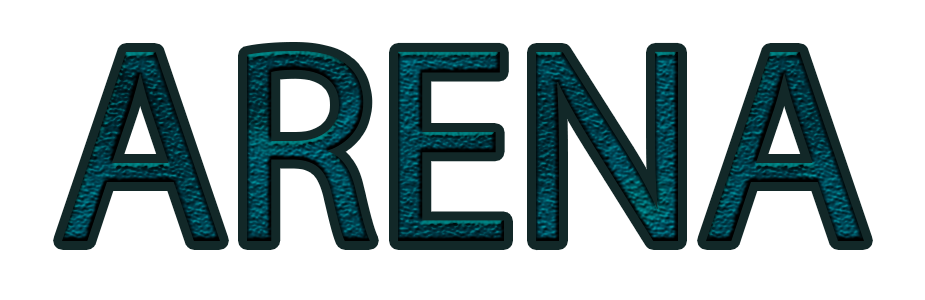
<style>
.page{position:relative;width:925px;height:300px;background:#ffffff}
.page>*{position:absolute;margin:0}
.t1{font:280px "MyriadPro-Regular"}
</style>
<div class="page">
<p class="t1" style="left:62px;top:51px;width:802px;height:191px">ARENA</p>
</div>
